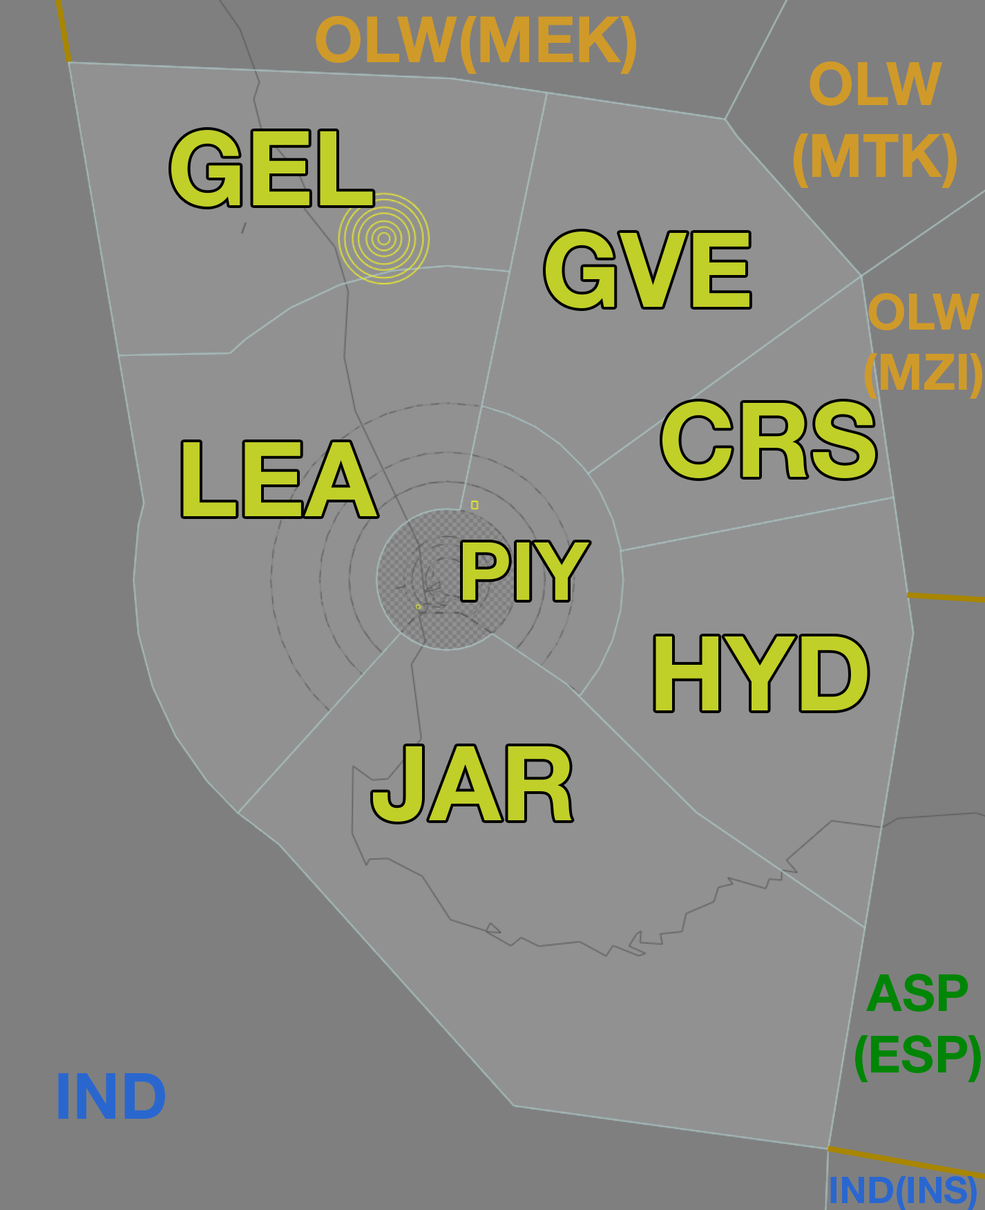
<style>
.page{position:relative;width:985px;height:1210px;background:#919191}
.page>*{position:absolute;margin:0}
.t1{font:63.6px "HelveticaNeueLTStd-Bd";color:#cf9a29}
.t2{font:59.8px "HelveticaNeueLTStd-Bd";color:#cf9a29}
.t3{font:103.9px "HelveticaNeueLTStd-Bd";color:#c1cf29}
.t4{font:50.2px "HelveticaNeueLTStd-Bd";color:#cf9a29}
.t5{font:80.4px "HelveticaNeueLTStd-Bd";color:#c1cf29}
.t6{font:51.4px "HelveticaNeueLTStd-Bd";color:#008506}
.t7{font:63.9px "HelveticaNeueLTStd-Bd";color:#2967cf}
.t8{font:37.2px "HelveticaNeueLTStd-Bd";color:#2967cf}
</style>
<div class="page">
<p class="t1" style="left:316px;top:16px;width:320px;height:58px">OLW(MEK)</p>
<p class="t2" style="left:793px;top:62px;width:164px;height:126px;text-align:center">OLW<br>(MTK)</p>
<p class="t3" style="left:171px;top:130px;width:202px;height:77px">GEL</p>
<p class="t3" style="left:546px;top:232px;width:204px;height:76px">GVE</p>
<p class="t4" style="left:865px;top:293px;width:118px;height:106px;text-align:center">OLW<br>(MZI)</p>
<p class="t3" style="left:663px;top:402px;width:213px;height:76px">CRS</p>
<p class="t3" style="left:183px;top:442px;width:194px;height:74px">LEA</p>
<p class="t5" style="left:463px;top:542px;width:126px;height:58px">PIY</p>
<p class="t3" style="left:656px;top:636px;width:212px;height:74px">HYD</p>
<p class="t3" style="left:373px;top:746px;width:199px;height:76px">JAR</p>
<p class="t6" style="left:856px;top:974px;width:125px;height:108px;text-align:center">ASP<br>(ESP)</p>
<p class="t7" style="left:58px;top:1073px;width:107px;height:46px">IND</p>
<p class="t8" style="left:831px;top:1176px;width:146px;height:35px">IND(INS)</p>
</div>
